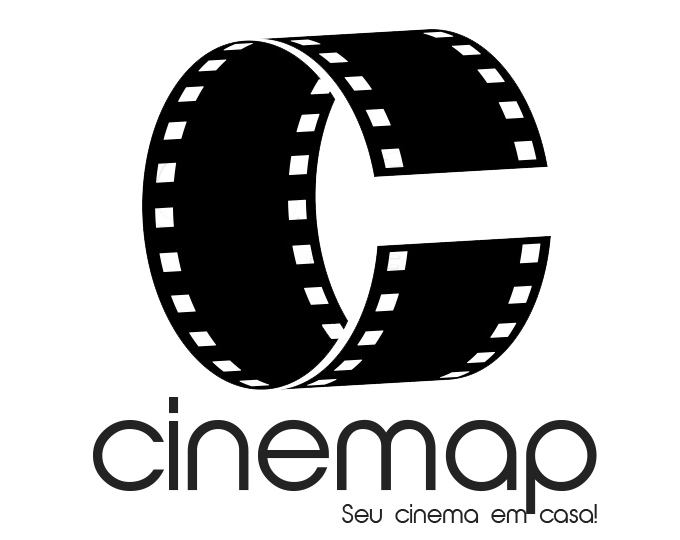
<style>
.page{position:relative;width:680px;height:540px;background:#ffffff}
.page>*{position:absolute;margin:0}
.t1{font:120.1px "AbeatbyKai";color:#232323}
.t2{font:23.4px "AbeatbyKai";color:#232323}
</style>
<div class="page">
<p class="t1" style="left:93px;top:397px;width:504px;height:117px">cinemap</p>
<p class="t2" style="left:342px;top:504px;width:255px;height:19px">Seu cinema em casa!</p>
</div>
